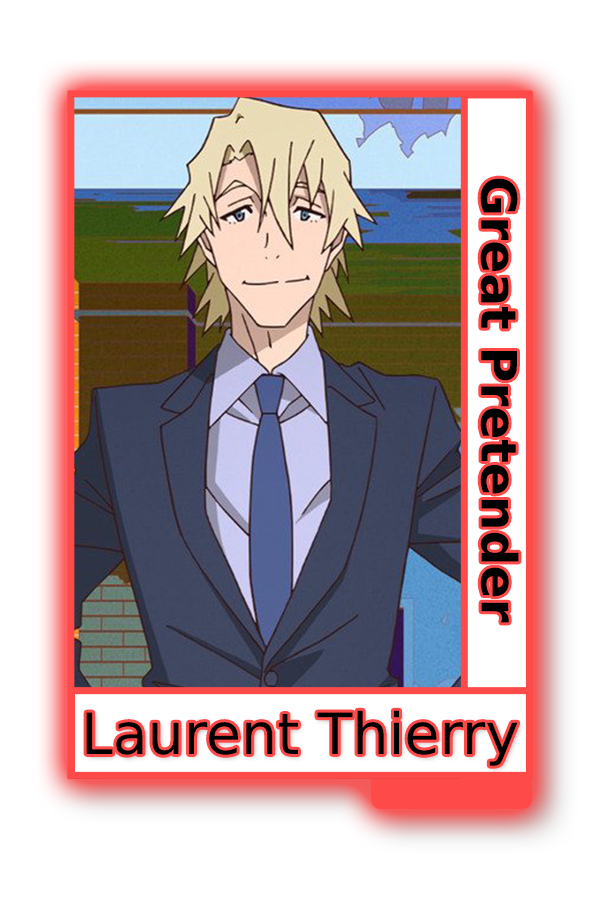
<style>
.page{position:relative;width:600px;height:900px;background:#ffffff}
.page>*{position:absolute;margin:0}
.t1{font:48.8px "MADETOMMY-Bold";color:#000000}
.t2{font:57px "CoolveticaRg-Regular";color:#000000}
</style>
<div class="page">
<p class="t1" style="left:480px;top:178px;width:39px;height:445px;rotate:90deg">Great Pretender</p>
<p class="t2" style="left:86px;top:710px;width:432px;height:56px">Laurent Thierry</p>
</div>
